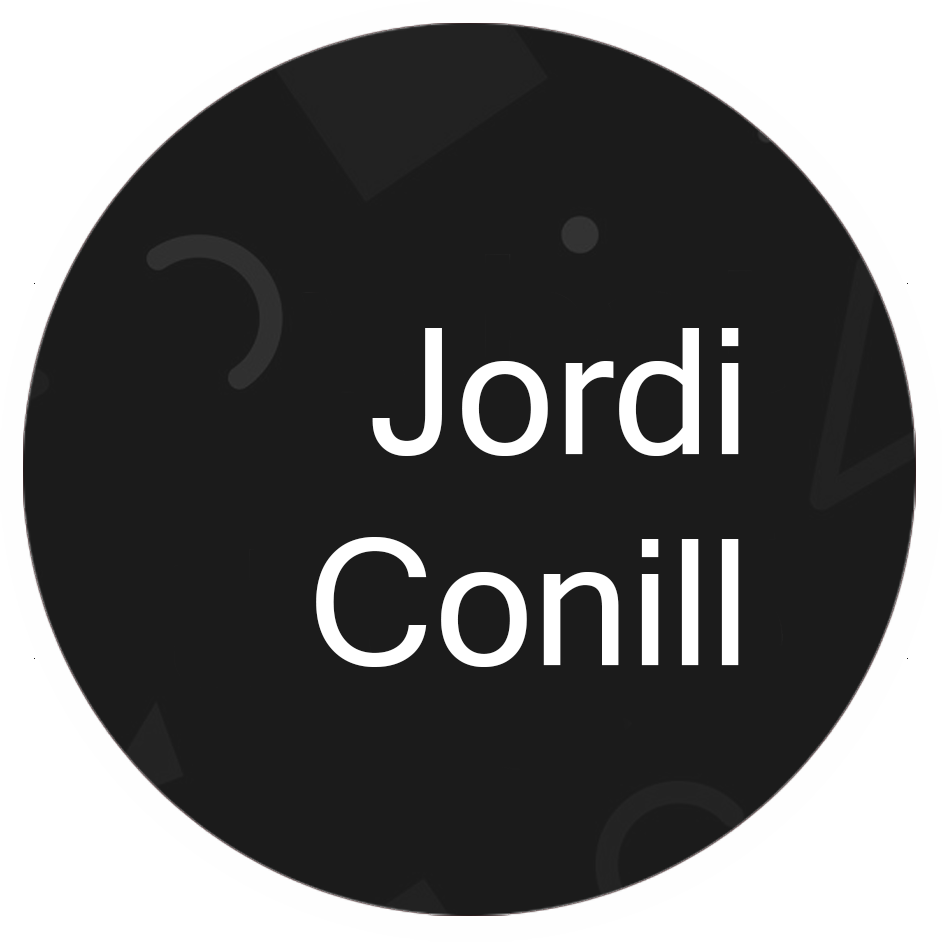
<style>
.page{position:relative;width:942px;height:942px;background:#1b1b1b}
.page>*{position:absolute;margin:0}
.t1{font:175.9px "MicrosoftSansSerif";color:#ffffff}
</style>
<div class="page">
<p class="t1" style="left:316px;top:328px;width:423px;height:339px;text-align:right">Jordi<br>Conill</p>
</div>
